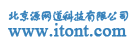
<style>
.page{position:relative;width:132px;height:42px;background:#ffffff}
.page>*{position:absolute;margin:0}
.t1{font:13.3px "FZSTK--GBK1-0";letter-spacing:-0.2em;color:#3782bb;font-weight:bold}
.t2{font:18px "TimesNewRomanPSMT";color:#3782bb;font-weight:bold}
</style>
<div class="page">
<p class="t1" style="left:8px;top:10px;width:121px;height:13px">北京源网道科技有限公司</p>
<p class="t2" style="left:8px;top:23px;width:119px;height:14px">www.itont.com</p>
</div>
